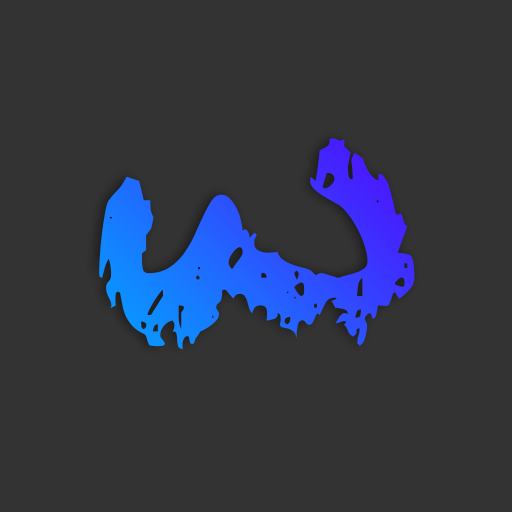
<style>
.page{position:relative;width:512px;height:512px;background:#333333}
.page>*{position:absolute;margin:0}
.t1{font:414.8px "Chalkduster"}
</style>
<div class="page">
<p class="t1" style="left:99px;top:138px;width:316px;height:211px">w</p>
</div>
